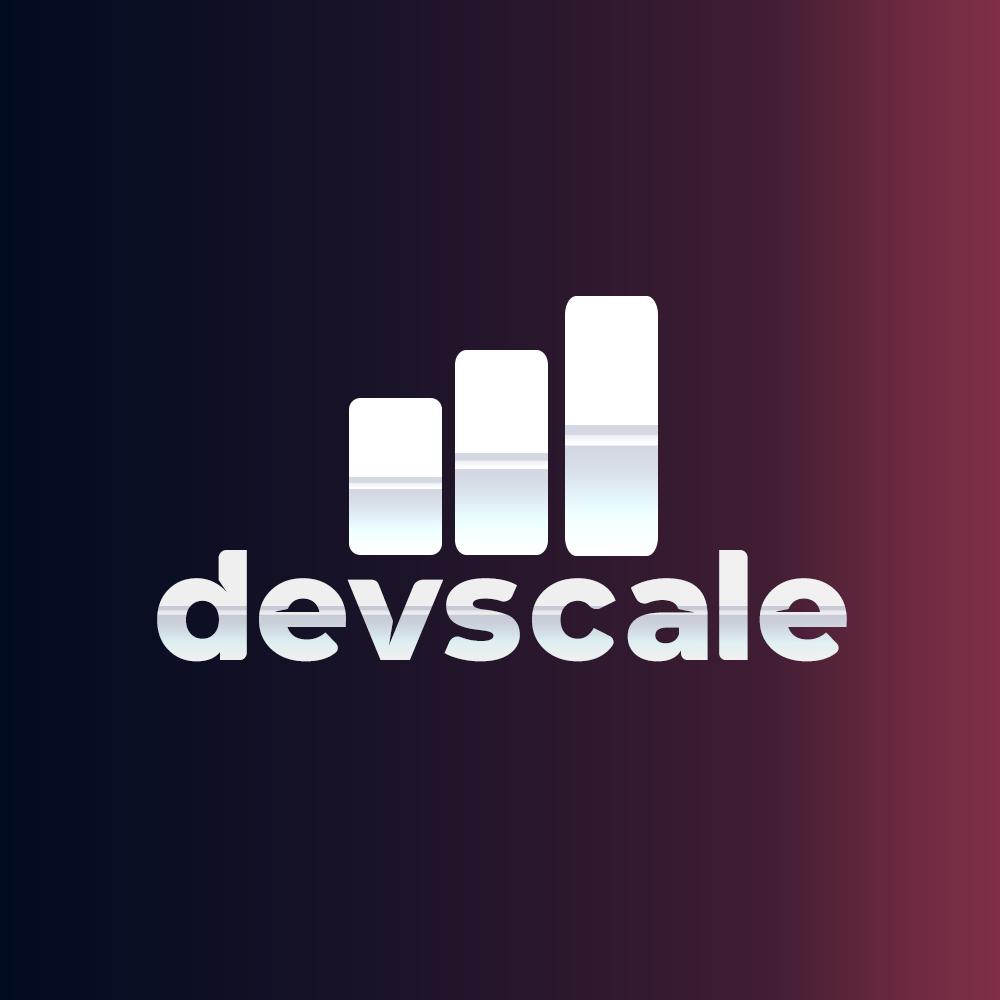
<style>
.page{position:relative;width:1000px;height:1000px}
.page>*{position:absolute;margin:0}
.t1{font:187.7px "WallmanLoveBold";letter-spacing:0.005em;color:#e7eff0}
</style>
<div class="page">
<p class="t1" style="left:157px;top:550px;width:690px;height:112px">devscale</p>
</div>
